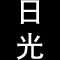
<style>
.page{position:relative;width:60px;height:60px;background:#000000}
.page>*{position:absolute;margin:0}
.t1{font:30px "STHeitiSC-Medium";color:#ffffff}
</style>
<div class="page">
<p class="t1" style="left:20px;top:0px;width:20px;height:24px">日</p>
<p class="t1" style="left:16px;top:32px;width:28px;height:28px">光</p>
</div>
